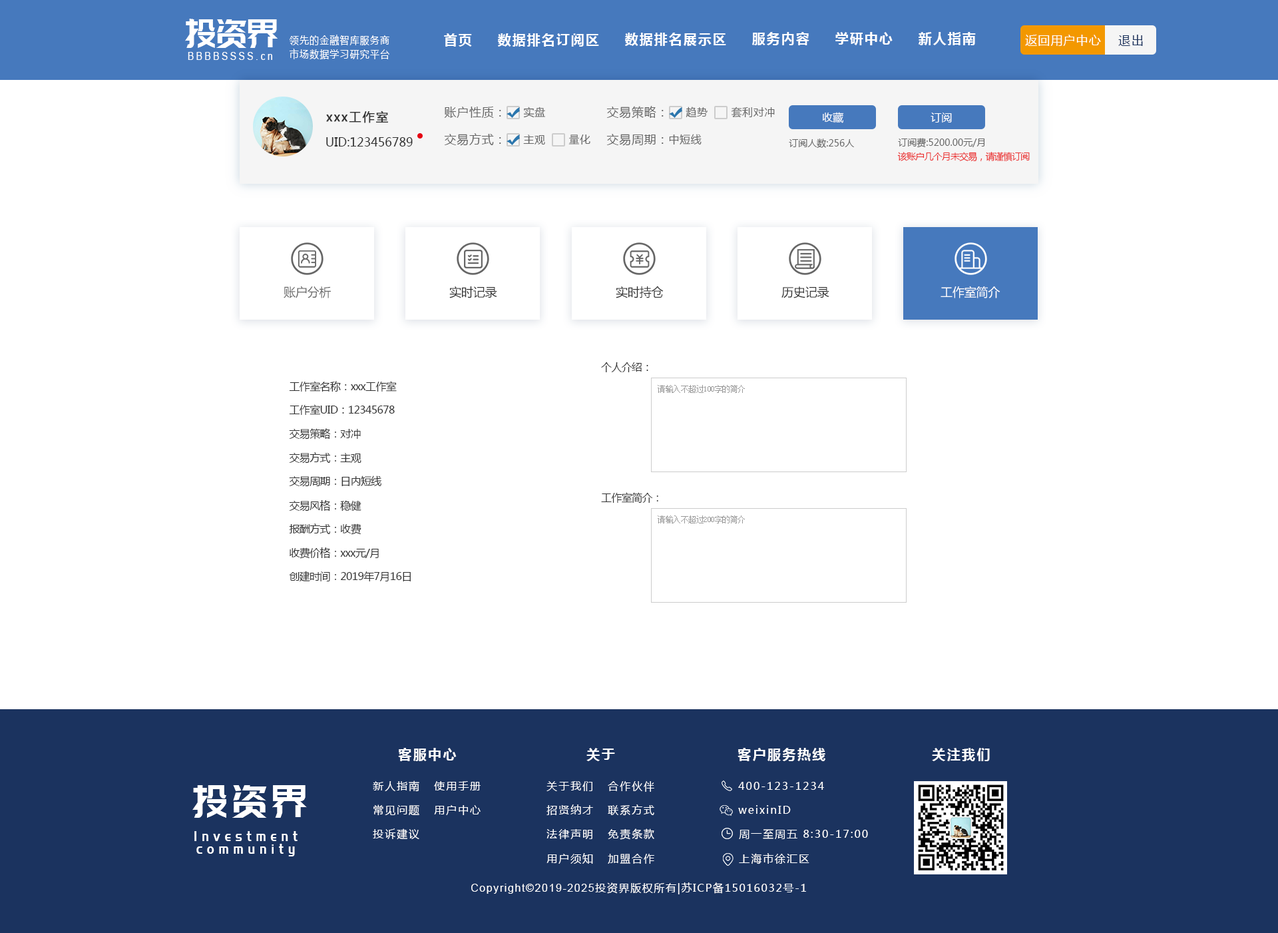
<style>
.page{position:relative;width:1278px;height:933px;background:#ffffff}
.page>*{position:absolute;margin:0}
.t1{font:39.7px "PangMenZhengDao";color:#ffffff;scale:0.86 1}
.t2{font:10.7px "MicrosoftYaHei";letter-spacing:0.1em;color:#ffffff;scale:0.86 1}
.t3{font:13.3px "MicrosoftYaHei-Bold";letter-spacing:0.1em;color:#ffffff}
.t4{font:12px "MicrosoftYaHei";letter-spacing:0.06em;color:#ffffff}
.t5{font:12px "MicrosoftYaHei";letter-spacing:0.1em;color:#1b335f}
.t6{font:10.7px "ArialMT";letter-spacing:0.26em;color:#ffffff;scale:0.86 1}
.t7{font:12px "MicrosoftYaHei";letter-spacing:0.1em;color:#333333;font-weight:bold}
.t8{font:12px "MicrosoftYaHei";letter-spacing:0.04em;color:#666666}
.t9{font:10.7px "MicrosoftYaHei";letter-spacing:0.04em;color:#666666}
.t10{font:10.7px "MicrosoftYaHei";color:#ffffff}
.t11{font:12px "MicrosoftYaHei";color:#333333}
.t12{font:9.3px "MicrosoftYaHei";color:#666666}
.t13{font:9.3px "MicrosoftYaHei";letter-spacing:-0.06em;color:#eb3030}
.t14{font:12px "MicrosoftYaHei";letter-spacing:-0.01em;color:#666666}
.t15{font:12px "MicrosoftYaHei";letter-spacing:-0.01em;color:#333333}
.t16{font:12px "MicrosoftYaHei";letter-spacing:-0.01em;color:#fffefe}
.t17{font:10.7px "MicrosoftYaHei";letter-spacing:-0.04em;color:#333333}
.t18{font:8px "SimSun";letter-spacing:-0.04em;color:#999999}
.t19{font:13.3px "MicrosoftYaHei-Bold";letter-spacing:0.12em;color:#ffffff}
.t20{font:45.2px "PangMenZhengDao";letter-spacing:0.1em;color:#ffffff;scale:0.86 1}
.t21{font:10.7px "MicrosoftYaHei";letter-spacing:0.12em;color:#ffffff}
.t22{font:14.4px/12.6px "PangMenZhengDao";letter-spacing:0.36em;color:#ffffff;scale:0.86 1}
.t23{font:10.7px "MicrosoftYaHei";letter-spacing:0.1em;color:#ffffff}
.t24{font:10.7px "ArialMT";letter-spacing:0.1em;color:#ffffff}
</style>
<div class="page">
<p class="t1" style="left:185px;top:19px;width:93px;height:29px">投资界</p>
<p class="t2" style="left:290px;top:35px;width:99px;height:10px">领先的金融智库服务商</p>
<p class="t3" style="left:444px;top:33px;width:28px;height:14px">首页</p>
<p class="t3" style="left:498px;top:33px;width:101px;height:14px">数据排名订阅区</p>
<p class="t3" style="left:625px;top:33px;width:101px;height:13px">数据排名展示区</p>
<p class="t3" style="left:752px;top:32px;width:58px;height:13px">服务内容</p>
<p class="t3" style="left:836px;top:32px;width:57px;height:13px">学研中心</p>
<p class="t3" style="left:918px;top:32px;width:58px;height:13px">新人指南</p>
<p class="t4" style="left:1025px;top:35px;width:76px;height:11px">返回用户中心</p>
<p class="t5" style="left:1119px;top:35px;width:24px;height:11px">退出</p>
<p class="t6" style="left:188px;top:52px;width:84px;height:8px">BBBBSSSS.cn</p>
<p class="t2" style="left:290px;top:49px;width:99px;height:10px">市场数据学习研究平台</p>
<p class="t7" style="left:326px;top:111px;width:62px;height:12px">xxx工作室</p>
<p class="t8" style="left:444px;top:107px;width:57px;height:11px">账户性质：</p>
<p class="t9" style="left:523px;top:107px;width:22px;height:11px">实盘</p>
<p class="t8" style="left:607px;top:106px;width:57px;height:13px">交易策略：</p>
<p class="t9" style="left:686px;top:107px;width:22px;height:10px">趋势</p>
<p class="t9" style="left:731px;top:107px;width:44px;height:11px">套利对冲</p>
<p class="t10" style="left:822px;top:112px;width:22px;height:11px">收藏</p>
<p class="t10" style="left:931px;top:113px;width:21px;height:10px">订阅</p>
<p class="t11" style="left:326px;top:137px;width:87px;height:9px">UID:123456789</p>
<p class="t8" style="left:444px;top:133px;width:57px;height:13px">交易方式：</p>
<p class="t9" style="left:523px;top:134px;width:22px;height:10px">主观</p>
<p class="t9" style="left:569px;top:134px;width:22px;height:10px">量化</p>
<p class="t8" style="left:607px;top:134px;width:57px;height:12px">交易周期：</p>
<p class="t9" style="left:669px;top:134px;width:33px;height:11px">中短线</p>
<p class="t12" style="left:898px;top:138px;width:87px;height:10px">订阅费:5200.00元/月</p>
<p class="t12" style="left:789px;top:138px;width:66px;height:10px">订阅人数:256人</p>
<p class="t13" style="left:898px;top:152px;width:132px;height:10px">该账户几个月未交易，请谨慎订阅</p>
<p class="t14" style="left:284px;top:286px;width:47px;height:12px">账户分析</p>
<p class="t15" style="left:449px;top:286px;width:48px;height:12px">实时记录</p>
<p class="t15" style="left:616px;top:286px;width:48px;height:12px">实时持仓</p>
<p class="t15" style="left:782px;top:286px;width:48px;height:12px">历史记录</p>
<p class="t16" style="left:941px;top:286px;width:60px;height:12px">工作室简介</p>
<p class="t17" style="left:601px;top:362px;width:47px;height:10px">个人介绍：</p>
<p class="t17" style="left:289px;top:381px;width:108px;height:10px">工作室名称：xxx工作室</p>
<p class="t18" style="left:658px;top:385px;width:87px;height:8px">请输入不超过100字的简介</p>
<p class="t17" style="left:289px;top:404px;width:106px;height:11px">工作室UID：12345678</p>
<p class="t17" style="left:289px;top:428px;width:72px;height:11px">交易策略：对冲</p>
<p class="t17" style="left:289px;top:452px;width:73px;height:11px">交易方式：主观</p>
<p class="t17" style="left:289px;top:475px;width:93px;height:12px">交易周期：日内短线</p>
<p class="t17" style="left:601px;top:492px;width:57px;height:11px">工作室简介：</p>
<p class="t17" style="left:289px;top:500px;width:73px;height:11px">交易风格：稳健</p>
<p class="t18" style="left:658px;top:515px;width:87px;height:8px">请输入不超过200字的简介</p>
<p class="t17" style="left:289px;top:523px;width:73px;height:12px">报酬方式：收费</p>
<p class="t17" style="left:290px;top:547px;width:89px;height:12px">收费价格：xxx元/月</p>
<p class="t17" style="left:289px;top:571px;width:122px;height:11px">创建时间：2019年7月16日</p>
<p class="t19" style="left:398px;top:748px;width:59px;height:13px">客服中心</p>
<p class="t19" style="left:587px;top:748px;width:28px;height:13px">关于</p>
<p class="t19" style="left:738px;top:748px;width:88px;height:13px">客户服务热线</p>
<p class="t19" style="left:932px;top:748px;width:58px;height:13px">关注我们</p>
<p class="t20" style="left:192px;top:785px;width:115px;height:33px">投资界</p>
<p class="t21" style="left:373px;top:780px;width:46px;height:12px">新人指南</p>
<p class="t21" style="left:434px;top:781px;width:47px;height:9px">使用手册</p>
<p class="t21" style="left:547px;top:781px;width:46px;height:10px">关于我们</p>
<p class="t21" style="left:608px;top:781px;width:46px;height:11px">合作伙伴</p>
<p class="t21" style="left:738px;top:782px;width:86px;height:8px">400-123-1234</p>
<p class="t21" style="left:374px;top:804px;width:45px;height:12px">常见问题</p>
<p class="t21" style="left:434px;top:805px;width:47px;height:10px">用户中心</p>
<p class="t21" style="left:547px;top:804px;width:46px;height:11px">招贤纳才</p>
<p class="t21" style="left:608px;top:804px;width:46px;height:12px">联系方式</p>
<p class="t21" style="left:738px;top:805px;width:53px;height:9px">weixinID</p>
<p class="t22" style="left:194px;top:831px;width:104px;height:25px;text-align:center">Investment<br>community</p>
<p class="t21" style="left:373px;top:828px;width:46px;height:12px">投诉建议</p>
<p class="t21" style="left:547px;top:829px;width:46px;height:10px">法律声明</p>
<p class="t21" style="left:608px;top:828px;width:46px;height:12px">免责条款</p>
<p class="t21" style="left:739px;top:829px;width:129px;height:10px">周一至周五 8:30-17:00</p>
<p class="t21" style="left:547px;top:853px;width:46px;height:11px">用户须知</p>
<p class="t21" style="left:608px;top:854px;width:46px;height:10px">加盟合作</p>
<p class="t21" style="left:739px;top:853px;width:71px;height:11px">上海市徐汇区</p>
<p class="t23" style="left:471px;top:882px;width:335px;height:12px"><span class="t24">Copyright©2019-2025</span>投资界版权所有|苏ICP备15016032号-1</p>
</div>
